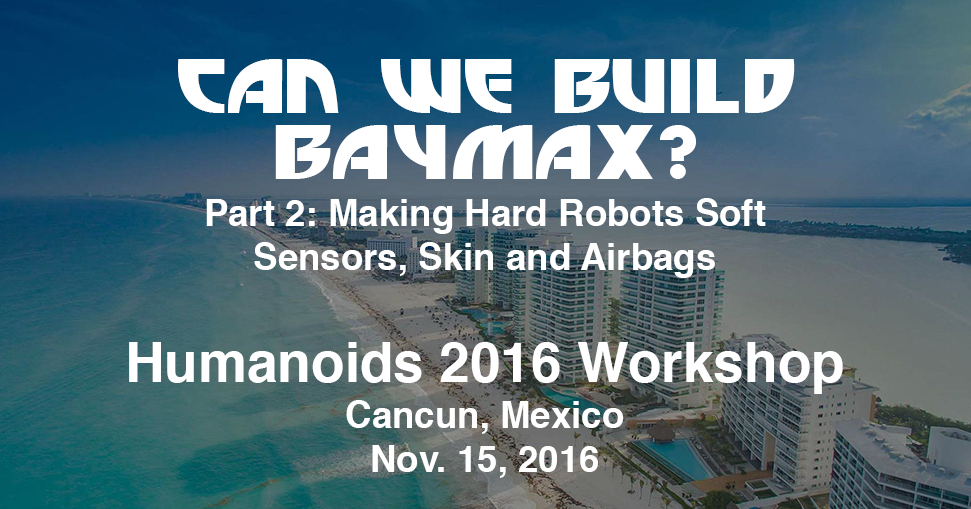
<style>
.page{position:relative;width:971px;height:509px}
.page>*{position:absolute;margin:0}
.t1{font:73.3px "BigHero";color:#ffffff}
.t2{font:36.7px "Helvetica-Bold";color:#ffffff}
.t3{font:55px "Helvetica-Bold";color:#ffffff}
</style>
<div class="page">
<p class="t1" style="left:178px;top:59px;width:617px;height:120px;text-align:center">CAN WE BUILD<br>BAYMAX?</p>
<p class="t2" style="left:206px;top:198px;width:560px;height:80px;text-align:center">Part 2: Making Hard Robots Soft<br>Sensors, Skin and Airbags</p>
<p class="t3" style="left:129px;top:342px;width:714px;height:52px">Humanoids 2016 Workshop</p>
<p class="t2" style="left:346px;top:400px;width:278px;height:78px;text-align:center">Cancun, Mexico<br>Nov. 15, 2016</p>
</div>
